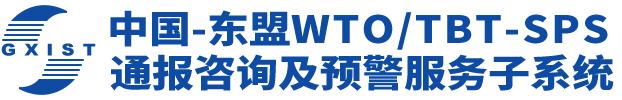
<style>
.page{position:relative;width:622px;height:100px;background:#ffffff}
.page>*{position:absolute;margin:0}
.t1{font:37.8px "SourceHanSansCN-Heavy";letter-spacing:0.05em;color:#0e4ca4;scale:1.11 1}
.t2{font:37.8px "SourceHanSansCN-Heavy";color:#0e4ca4;scale:1.11 1}
.t3{font:16.2px "Arial-Black";letter-spacing:0.06em;color:#0e4ca4;scale:1.11 1}
</style>
<div class="page">
<p class="t1" style="left:110px;top:10px;width:498px;height:40px"><span class="t2">中国-东盟</span>WTO/TBT-SPS</p>
<p class="t3" style="left:1px;top:43px;width:95px;height:13px">G X I S T</p>
<p class="t2" style="left:110px;top:54px;width:504px;height:37px">通报咨询及预警服务子系统</p>
</div>
